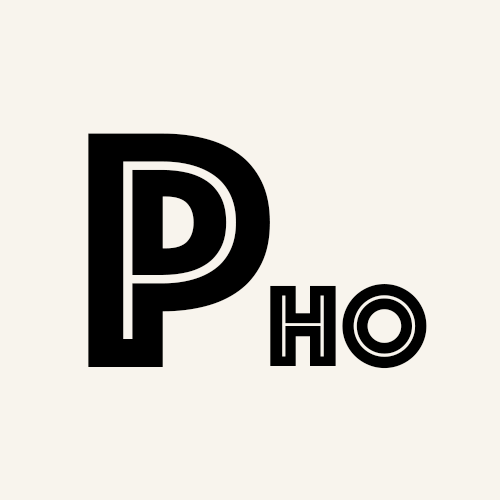
<style>
.page{position:relative;width:500px;height:500px;background:#f8f4ed}
.page>*{position:absolute;margin:0}
.t1{font:350px "Phosphate-Inline";color:#000000}
.t2{font:120px "Phosphate-Inline";color:#000000}
</style>
<div class="page">
<p class="t1" style="left:88px;top:133px;width:182px;height:234px">P</p>
<p class="t2" style="left:270px;top:284px;width:157px;height:85px">ho</p>
</div>
